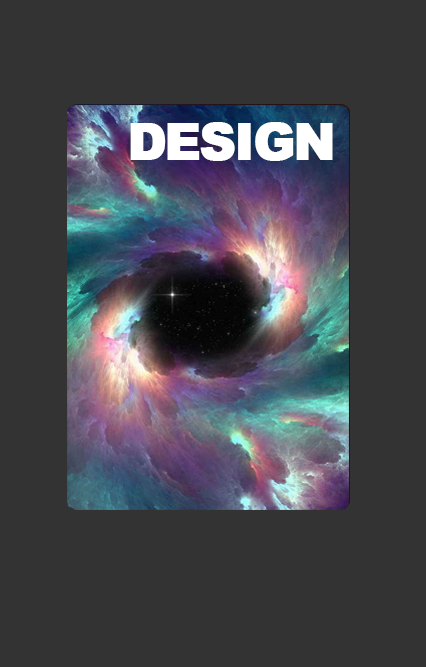
<style>
.page{position:relative;width:426px;height:667px;background:#333333}
.page>*{position:absolute;margin:0}
.t1{font:50px "Arial-Black";letter-spacing:-0.05em;color:#ffffff;font-weight:bold}
</style>
<div class="page">
<p class="t1" style="left:130px;top:122px;width:203px;height:39px">DESIGN</p>
</div>
